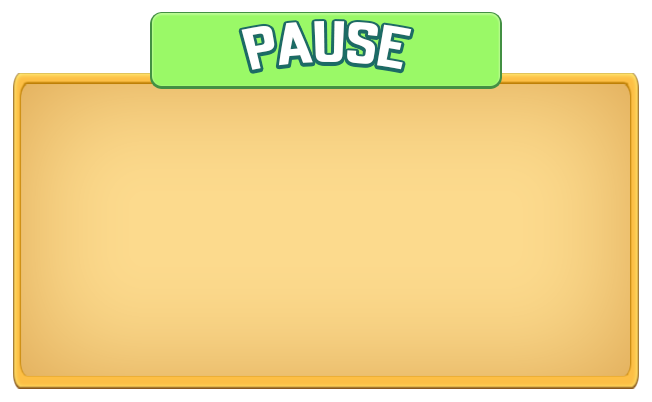
<style>
.page{position:relative;width:652px;height:402px}
.page>*{position:absolute;margin:0}
.t1{font:52.4px "UniversalKnowledge";letter-spacing:-0.02em;color:#ffffff;scale:1.14 1}
</style>
<div class="page">
<p class="t1" style="left:241px;top:21px;width:171px;height:49px">PAUSE</p>
</div>
